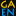
<style>
.page{position:relative;width:16px;height:16px;background:#101010}
.page>*{position:absolute;margin:0}
.t1{font:9.5px "LithosPro-Regular";color:#ffcc00}
.t2{font:9.5px "LithosPro-Regular";color:#009cff}
</style>
<div class="page">
<p class="t1" style="left:1px;top:0px;width:14px;height:8px">GA</p>
<p class="t2" style="left:2px;top:8px;width:12px;height:8px">EN</p>
</div>
